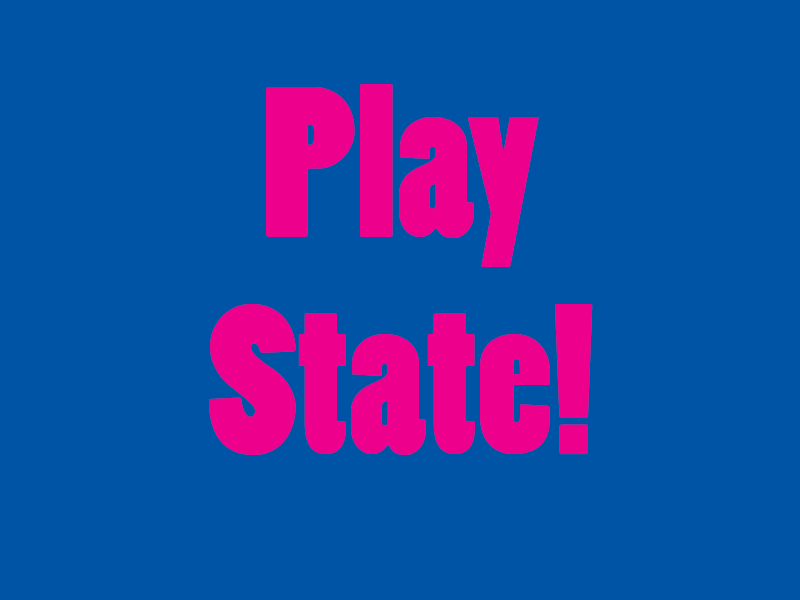
<style>
.page{position:relative;width:800px;height:600px;background:#0054a6}
.page>*{position:absolute;margin:0}
.t1{font:200px/216.7px "PoplarStd";color:#ec008c}
</style>
<div class="page">
<p class="t1" style="left:209px;top:84px;width:384px;height:371px;text-align:center">Play<br>State!</p>
</div>
